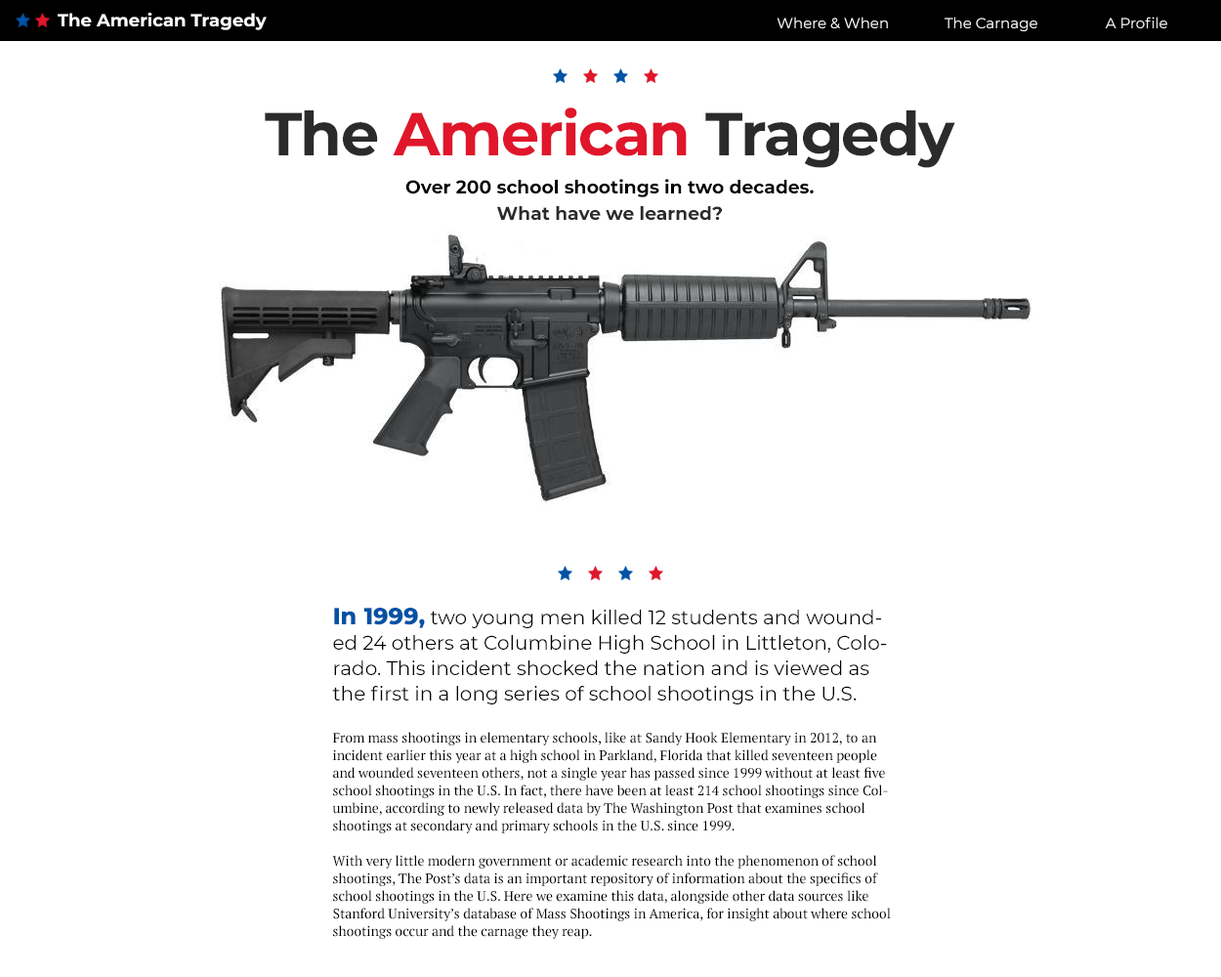
<style>
.page{position:relative;width:1221px;height:977px;background:#ffffff}
.page>*{position:absolute;margin:0}
.t1{font:17.6px "Montserrat-Bold";color:#ffffff}
.t2{font:14.7px "Montserrat-Regular";color:#ffffff}
.t3{font:60.6px "Montserrat-Bold";letter-spacing:-0.025em;color:#e0162b}
.t4{font:60.6px "Montserrat-Bold";letter-spacing:-0.025em;color:#2b2b2b}
.t5{font:18.1px/26.6px "Montserrat-Bold";color:#000000}
.t6{font:18.1px/26.6px "Montserrat-Bold";color:#2b2b2b}
.t7{font:19.5px/25.4px "Montserrat-Regular";color:#000000}
.t8{font:23.4px/25.4px "Montserrat-ExtraBold";color:#0052a5}
.t9{font:13.7px/17.6px "PTSerif-Regular";color:#000000}
</style>
<div class="page">
<p class="t1" style="left:58px;top:13px;width:209px;height:17px">The American Tragedy</p>
<p class="t2" style="left:776px;top:17px;width:112px;height:11px">Where &amp; When</p>
<p class="t2" style="left:944px;top:17px;width:93px;height:14px">The Carnage</p>
<p class="t2" style="left:1105px;top:17px;width:62px;height:11px">A Profile</p>
<p class="t3" style="left:265px;top:107px;width:690px;height:61px"><span class="t4">The </span>American<span class="t4"> Tragedy</span></p>
<p class="t5" style="left:405px;top:179px;width:409px;height:42px;text-align:center">Over 200 school shootings in two decades.<br><span class="t6">What have we learned?</span></p>
<p class="t7" style="left:332px;top:608px;width:555px;height:96px"><span class="t8">In 1999,</span> two young men killed 12 students and wounded 24 others at Columbine High School in Littleton, Colorado. This incident shocked the nation and is viewed as the first in a long series of school shootings in the U.S.</p>
<p class="t9" style="left:332px;top:732px;width:559px;height:207px">From mass shootings in elementary schools, like at Sandy Hook Elementary in 2012, to an incident earlier this year at a high school in Parkland, Florida that killed seventeen people and wounded seventeen others, not a single year has passed since 1999 without at least five school shootings in the U.S. In fact, there have been at least 214 school shootings since Columbine, according to newly released data by The Washington Post that examines school shootings at secondary and primary schools in the U.S. since 1999. <br><br>With very little modern government or academic research into the phenomenon of school shootings, The Post’s data is an important repository of information about the specifics of school shootings in the U.S. Here we examine this data, alongside other data sources like Stanford University’s database of Mass Shootings in America, for insight about where school shootings occur and the carnage they reap.</p>
</div>
